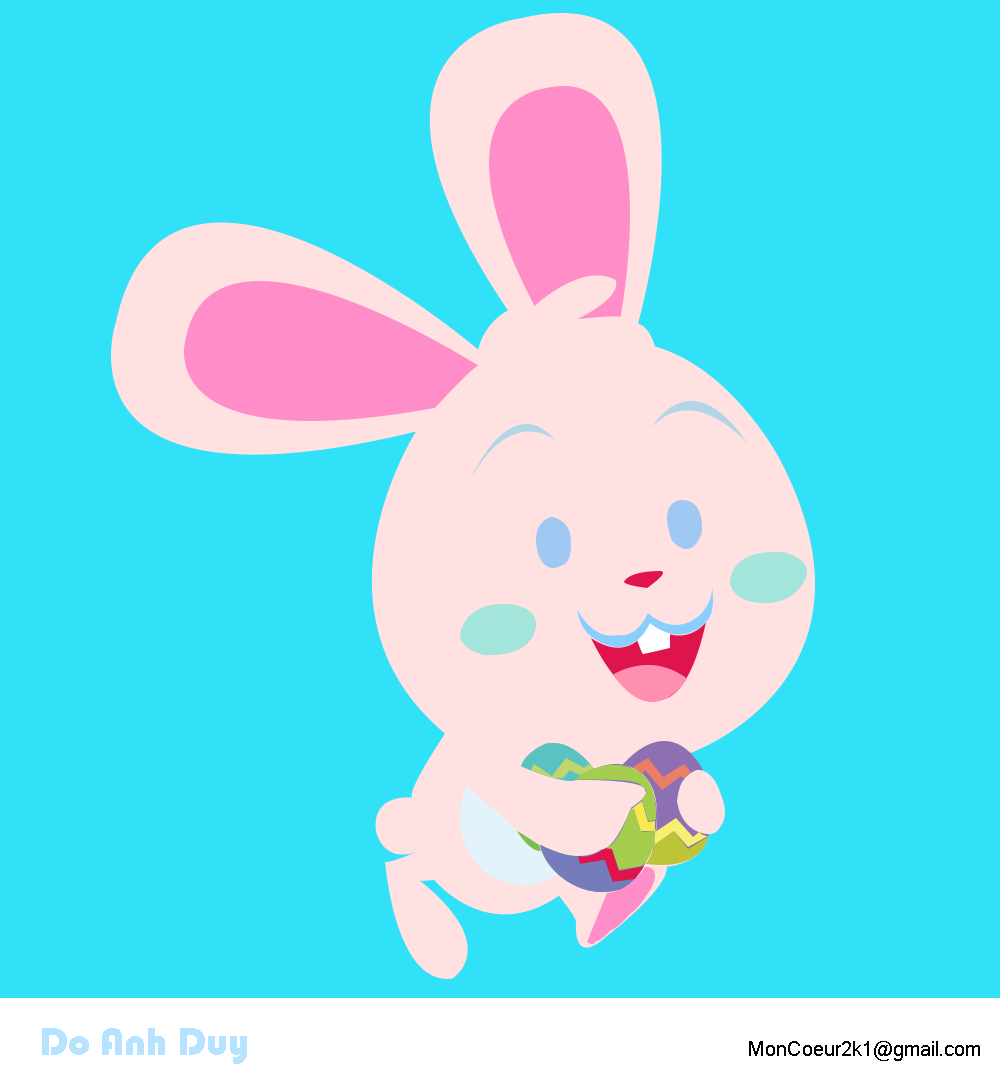
<style>
.page{position:relative;width:1000px;height:1080px;background:#31e1f7}
.page>*{position:absolute;margin:0}
.t1{font:40px "Bauhaus93";color:#b6e3ff}
.t2{font:20px "MicrosoftSansSerif";color:#000203}
</style>
<div class="page">
<p class="t1" style="left:42px;top:1028px;width:205px;height:36px">Do Anh Duy</p>
<p class="t2" style="left:749px;top:1041px;width:231px;height:20px">MonCoeur2k1@gmail.com</p>
</div>
